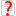
<style>
.page{position:relative;width:16px;height:16px}
.page>*{position:absolute;margin:0}
.t1{font:22px "MyriadPro-Regular";color:#ff0000}
</style>
<div class="page">
<p class="t1" style="left:5px;top:1px;width:7px;height:15px">?</p>
</div>
